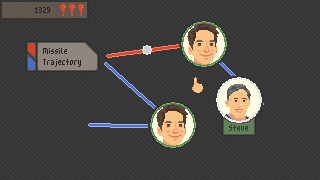
<style>
.page{position:relative;width:320px;height:180px;background:#353535}
.page>*{position:absolute;margin:0}
.t1{font:16px "m3x6";color:#282424}
.t2{font:16px/11px "m3x6";color:#282424}
.t3{font:16px "m3x6";color:#353535}
</style>
<div class="page">
<p class="t1" style="left:35px;top:7px;width:15px;height:6px">1329</p>
<p class="t2" style="left:43px;top:48px;width:38px;height:19px">Missile<br>Trajectory</p>
<p class="t3" style="left:229px;top:125px;width:19px;height:6px">Steve</p>
</div>
